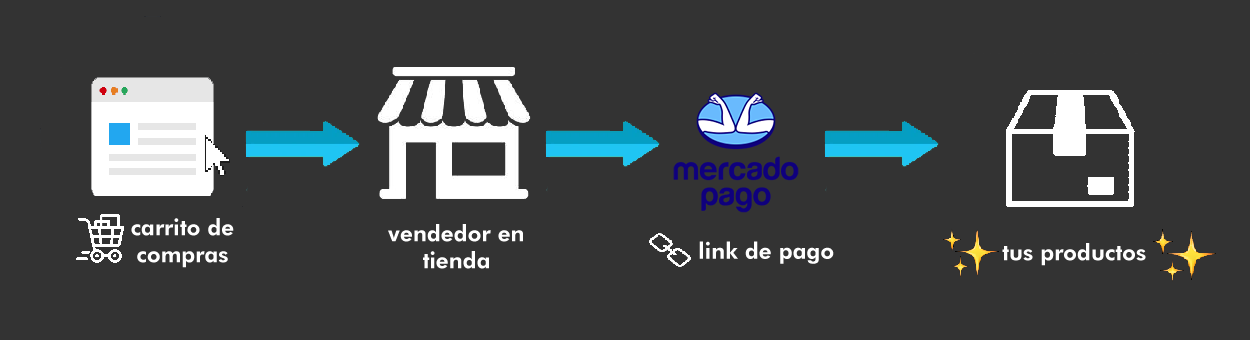
<style>
.page{position:relative;width:1250px;height:340px;background:#333333}
.page>*{position:absolute;margin:0}
.t1{font:22.6px "FuturaBT-Heavy";color:#ffffff}
</style>
<div class="page">
<p class="t1" style="left:131px;top:218px;width:103px;height:50px;text-align:center">carrito de compras</p>
<p class="t1" style="left:388px;top:224px;width:135px;height:45px;text-align:center">vendedor en tienda</p>
<p class="t1" style="left:699px;top:241px;width:135px;height:23px">link de pago</p>
<p class="t1" style="left:1002px;top:243px;width:144px;height:23px">tus productos</p>
</div>
